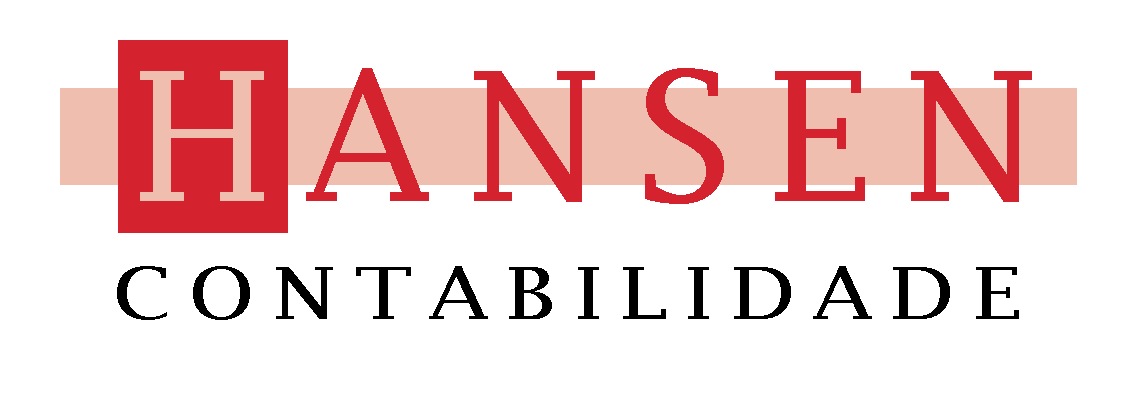
<style>
.page{position:relative;width:1140px;height:400px;background:#ffffff}
.page>*{position:absolute;margin:0}
.t1{font:180px "LucidaFax";letter-spacing:0.18em;color:#d4222e;font-variant:small-caps}
.t2{font:72px "LucidaFax";letter-spacing:0.18em;color:#000000;font-variant:small-caps;scale:1.2 1}
</style>
<div class="page">
<p class="t1" style="left:140px;top:68px;width:892px;height:136px">HANSEN</p>
<p class="t2" style="left:117px;top:266px;width:902px;height:54px">CONTABILIDADE</p>
</div>
